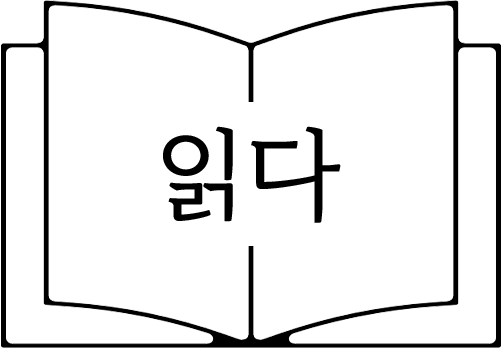
<style>
.page{position:relative;width:502px;height:348px;background:#ffffff}
.page>*{position:absolute;margin:0}
.t1{font:100px "RIDIBatang";color:#000000}
</style>
<div class="page">
<p class="t1" style="left:163px;top:126px;width:178px;height:97px">읽다</p>
</div>
